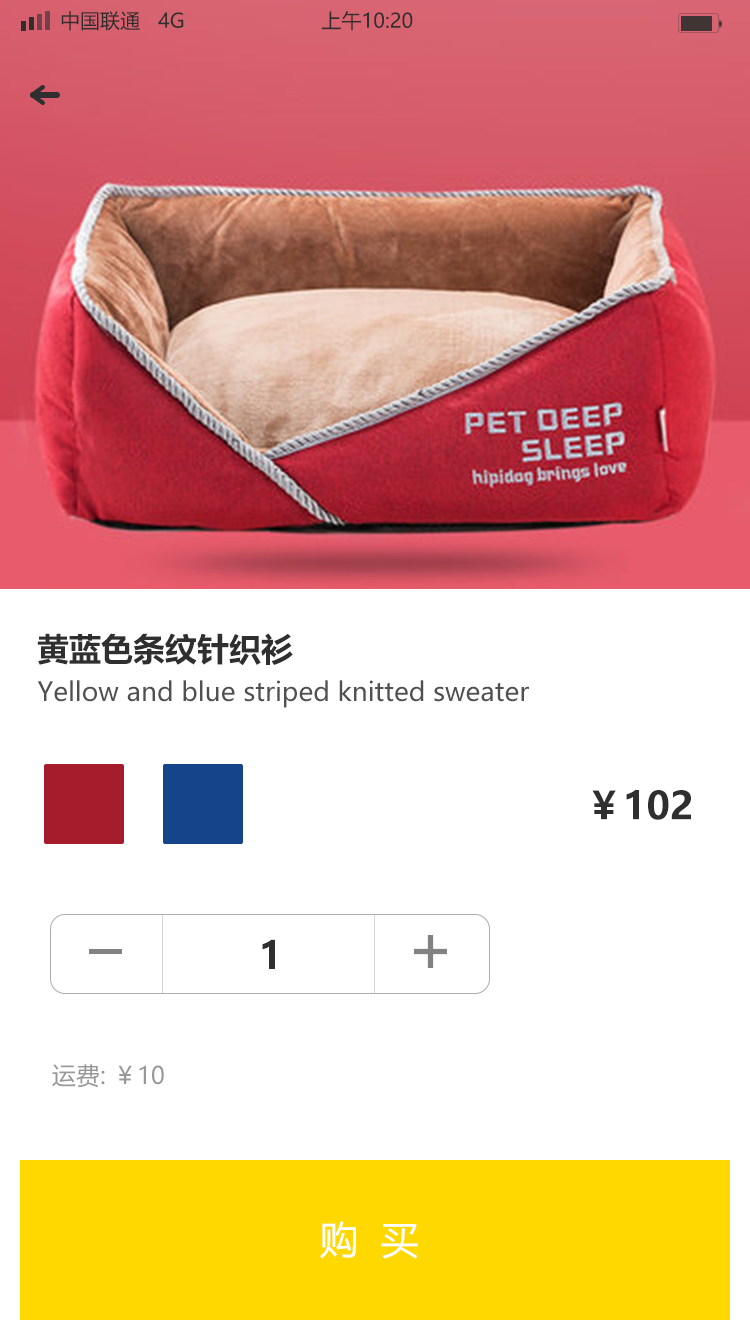
<style>
.page{position:relative;width:750px;height:1334px;background:#ffffff}
.page>*{position:absolute;margin:0}
.t1{font:20px "MicrosoftYaHei";color:#2f2f2f}
.t2{font:32px "MicrosoftYaHei-Bold";color:#2f2f2f}
.t3{font:26px "MicrosoftYaHei";color:#505050}
.t4{font:38px "MicrosoftYaHei-Bold";color:#2f2f2f}
.t5{font:24px "MicrosoftYaHei";color:#989898}
.t6{font:38px "MicrosoftYaHei";color:#ffffff}
</style>
<div class="page">
<p class="t1" style="left:61px;top:11px;width:352px;height:20px">中国联通   4G                       上午10:20</p>
<p class="t2" style="left:37px;top:633px;width:256px;height:33px">黄蓝色条纹针织衫</p>
<p class="t3" style="left:37px;top:680px;width:492px;height:28px">Yellow and blue striped knitted sweater</p>
<p class="t4" style="left:592px;top:790px;width:99px;height:30px">￥102</p>
<p class="t4" style="left:262px;top:939px;width:13px;height:30px">1</p>
<p class="t5" style="left:52px;top:1064px;width:112px;height:24px">运费: ￥10</p>
<p class="t6" style="left:320px;top:1221px;width:98px;height:38px">购  买</p>
</div>
